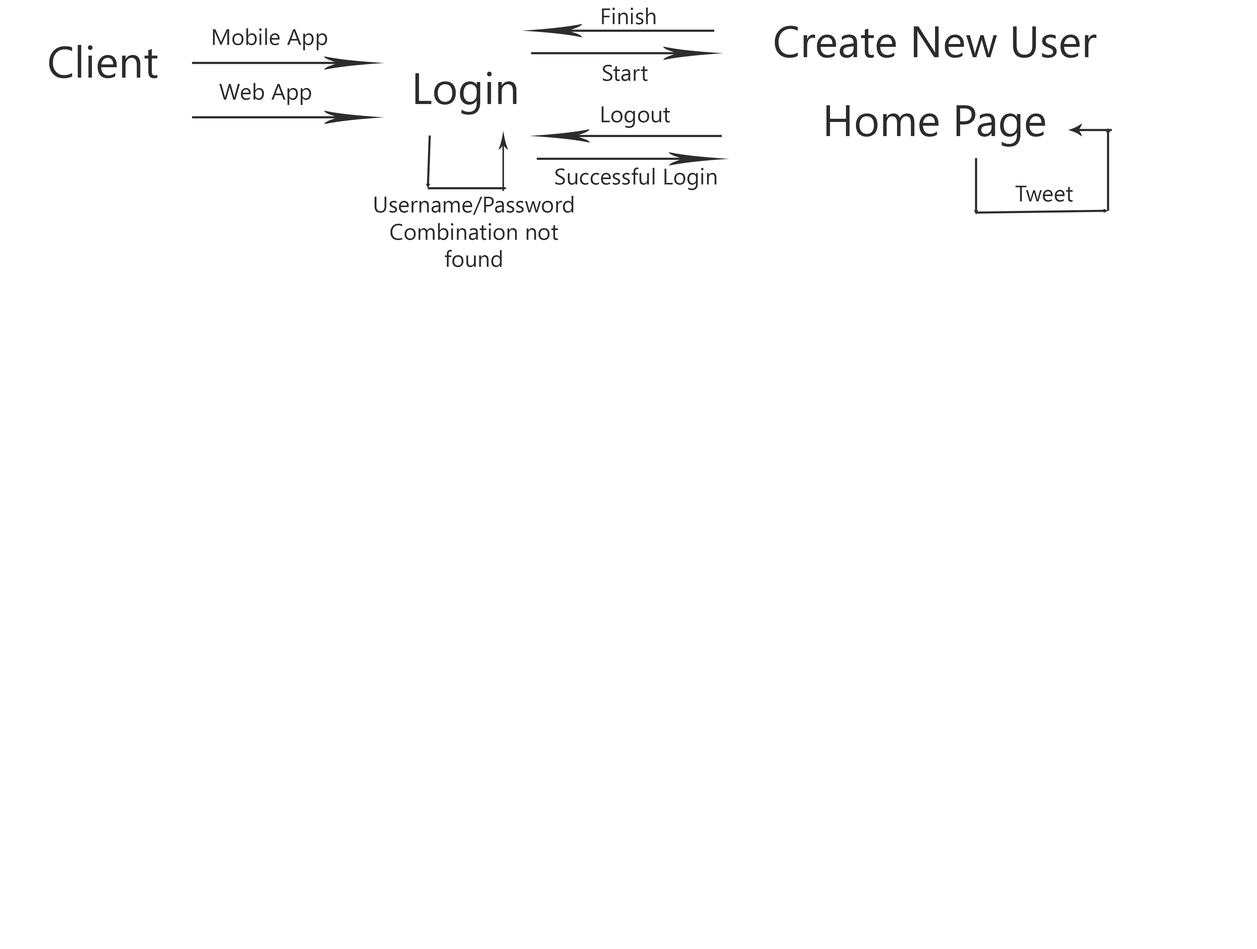
<style>
.page{position:relative;width:1257px;height:949px;background:#ffffff}
.page>*{position:absolute;margin:0}
.t1{font:22.6px "SegoeUISymbol";color:#2c2c2c}
.t2{font:44px "SegoeUISymbol";color:#2c2c2c}
</style>
<div class="page">
<p class="t1" style="left:602px;top:8px;width:53px;height:17px">Finish</p>
<p class="t1" style="left:213px;top:28px;width:114px;height:22px">Mobile App</p>
<p class="t2" style="left:774px;top:26px;width:322px;height:32px">Create New User</p>
<p class="t2" style="left:49px;top:45px;width:108px;height:33px">Client</p>
<p class="t1" style="left:603px;top:65px;width:45px;height:16px">Start</p>
<p class="t2" style="left:415px;top:72px;width:102px;height:43px">Login</p>
<p class="t1" style="left:219px;top:83px;width:92px;height:22px">Web App</p>
<p class="t1" style="left:601px;top:107px;width:69px;height:21px">Logout</p>
<p class="t2" style="left:826px;top:105px;width:219px;height:42px">Home Page</p>
<p class="t1" style="left:555px;top:167px;width:161px;height:23px">Successful Login</p>
<p class="t1" style="left:1015px;top:186px;width:58px;height:16px">Tweet</p>
<p class="t1" style="left:374px;top:196px;width:199px;height:71px;text-align:center">Username/Password Combination not found</p>
</div>
